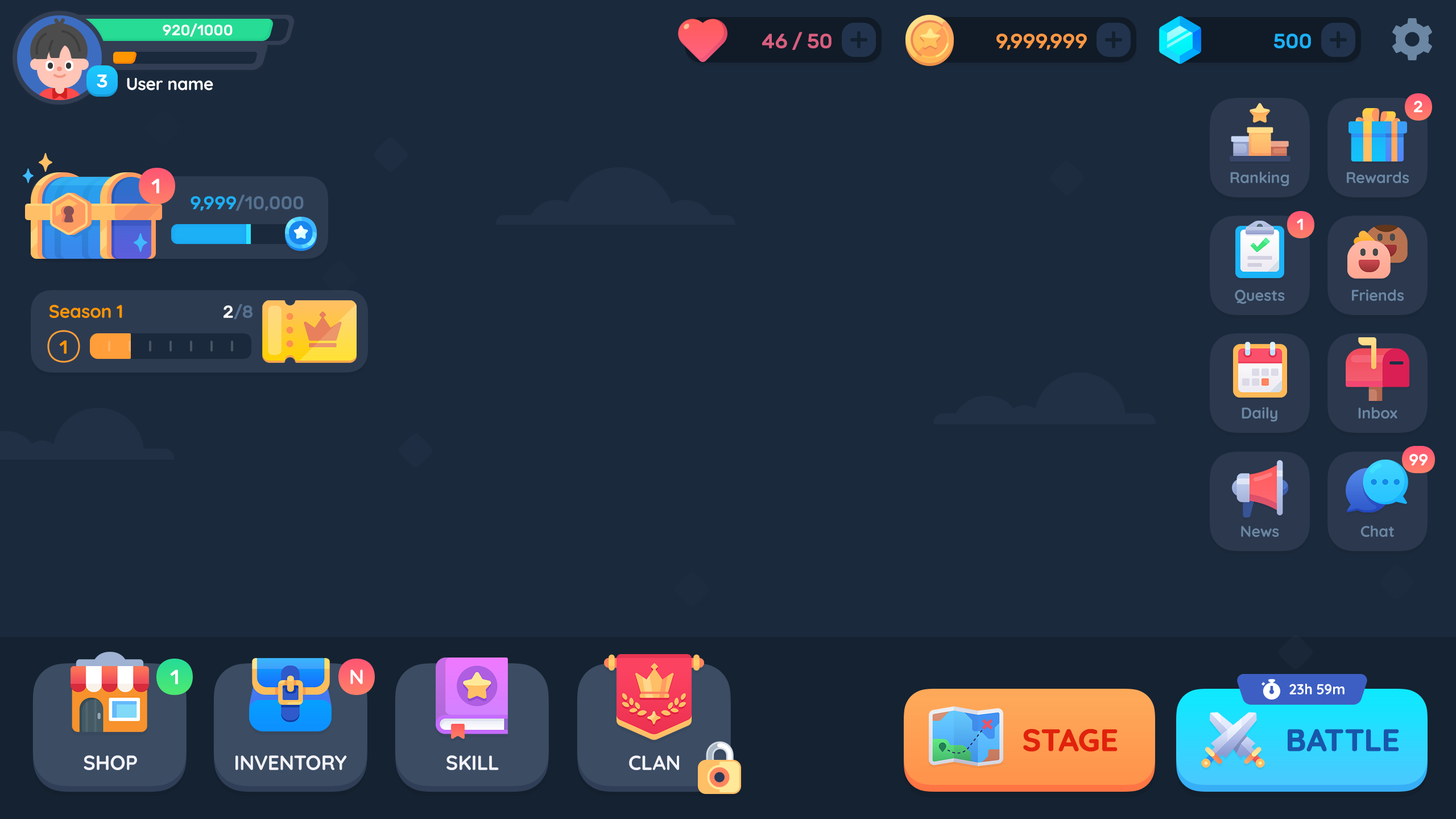
<style>
.page{position:relative;width:1456px;height:819px;background:#1a293c}
.page>*{position:absolute;margin:0}
.t1{font:14.8px "Rubik-Medium";letter-spacing:-0.01em;color:#ffffff}
.t2{font:20.5px "Rubik-Medium";letter-spacing:-0.01em;color:#d85f7f;text-transform:uppercase}
.t3{font:20.5px "Rubik-Medium";letter-spacing:-0.01em;color:#fd9744;text-transform:uppercase}
.t4{font:20.5px "Rubik-Medium";letter-spacing:-0.01em;color:#1cb0f6;text-transform:uppercase}
.t5{font:18.2px "Rubik-Medium";letter-spacing:-0.01em;color:#ffffff}
.t6{font:17.1px "Quicksand-Bold";letter-spacing:-0.01em;color:#ffffff}
.t7{font:15.9px "Rubik-Medium";letter-spacing:-0.01em;color:#ffffff;text-transform:uppercase}
.t8{font:15.4px "Quicksand-Bold";letter-spacing:-0.01em;color:#6b87a3}
.t9{font:20.5px "Rubik-Medium";letter-spacing:-0.01em;color:#ffffff;text-transform:uppercase}
.t10{font:18.2px "Rubik-Medium";letter-spacing:-0.01em;color:#557190}
.t11{font:18.2px "Rubik-Medium";letter-spacing:-0.01em;color:#1cb0f6}
.t12{font:18.2px "Quicksand-Bold";letter-spacing:-0.01em;color:#ff9600}
.t13{font:17.4px "Rubik-Medium";letter-spacing:-0.01em;color:#557190}
.t14{font:17.4px "Rubik-Medium";letter-spacing:-0.01em;color:#ffffff}
.t15{font:18.8px "Rubik-Medium";letter-spacing:-0.01em;color:#ff9600}
.t16{font:20.5px "Rubik-Medium";letter-spacing:-0.01em;color:#ffffff}
.t17{font:20.5px "Quicksand-Bold";letter-spacing:-0.01em;color:#ffffff;text-transform:uppercase}
.t18{font:14.2px "Quicksand-Bold";letter-spacing:-0.01em;color:#ffffff}
.t19{font:30.7px "Quicksand-Bold";color:#e1220c;text-transform:uppercase;font-weight:bold}
.t20{font:30.7px "Quicksand-Bold";color:#1856ab;text-transform:uppercase;font-weight:bold}
.t21{font:20.5px "Quicksand-Bold";letter-spacing:-0.01em;color:#f3f3fb;text-transform:uppercase}
</style>
<div class="page">
<p class="t1" style="left:163px;top:23px;width:70px;height:14px">920/1000</p>
<p class="t2" style="left:762px;top:32px;width:70px;height:18px">46 / 50</p>
<p class="t3" style="left:996px;top:34px;width:91px;height:16px">9,999,999</p>
<p class="t4" style="left:1274px;top:34px;width:37px;height:14px">500</p>
<p class="t5" style="left:97px;top:75px;width:10px;height:13px">3</p>
<p class="t6" style="left:127px;top:78px;width:86px;height:12px">User name</p>
<p class="t7" style="left:1414px;top:101px;width:8px;height:12px">2</p>
<p class="t8" style="left:1230px;top:171px;width:59px;height:16px">Ranking</p>
<p class="t8" style="left:1347px;top:171px;width:62px;height:12px">Rewards</p>
<p class="t9" style="left:151px;top:179px;width:8px;height:14px">1</p>
<p class="t10" style="left:191px;top:195px;width:113px;height:16px"><span class="t11">9,999</span>/10,000</p>
<p class="t7" style="left:1297px;top:218px;width:6px;height:12px">1</p>
<p class="t8" style="left:1235px;top:289px;width:50px;height:15px">Quests</p>
<p class="t8" style="left:1352px;top:289px;width:52px;height:12px">Friends</p>
<p class="t12" style="left:49px;top:305px;width:73px;height:13px">Season 1</p>
<p class="t13" style="left:224px;top:304px;width:29px;height:16px"><span class="t14">2</span>/8</p>
<p class="t15" style="left:59px;top:340px;width:8px;height:14px">1</p>
<p class="t8" style="left:1242px;top:407px;width:35px;height:15px">Daily</p>
<p class="t8" style="left:1358px;top:407px;width:39px;height:12px">Inbox</p>
<p class="t7" style="left:1409px;top:454px;width:19px;height:12px">99</p>
<p class="t8" style="left:1241px;top:526px;width:38px;height:11px">News</p>
<p class="t8" style="left:1360px;top:525px;width:34px;height:12px">Chat</p>
<p class="t16" style="left:170px;top:669px;width:8px;height:15px">1</p>
<p class="t17" style="left:350px;top:669px;width:13px;height:15px">N</p>
<p class="t18" style="left:1289px;top:684px;width:56px;height:10px">23h 59m</p>
<p class="t19" style="left:1023px;top:729px;width:95px;height:23px">Stage</p>
<p class="t20" style="left:1288px;top:729px;width:111px;height:22px">Battle</p>
<p class="t21" style="left:84px;top:755px;width:53px;height:15px">shop</p>
<p class="t21" style="left:235px;top:755px;width:112px;height:15px">Inventory</p>
<p class="t21" style="left:446px;top:755px;width:53px;height:15px">Skill</p>
<p class="t21" style="left:629px;top:755px;width:50px;height:15px">Clan</p>
</div>
